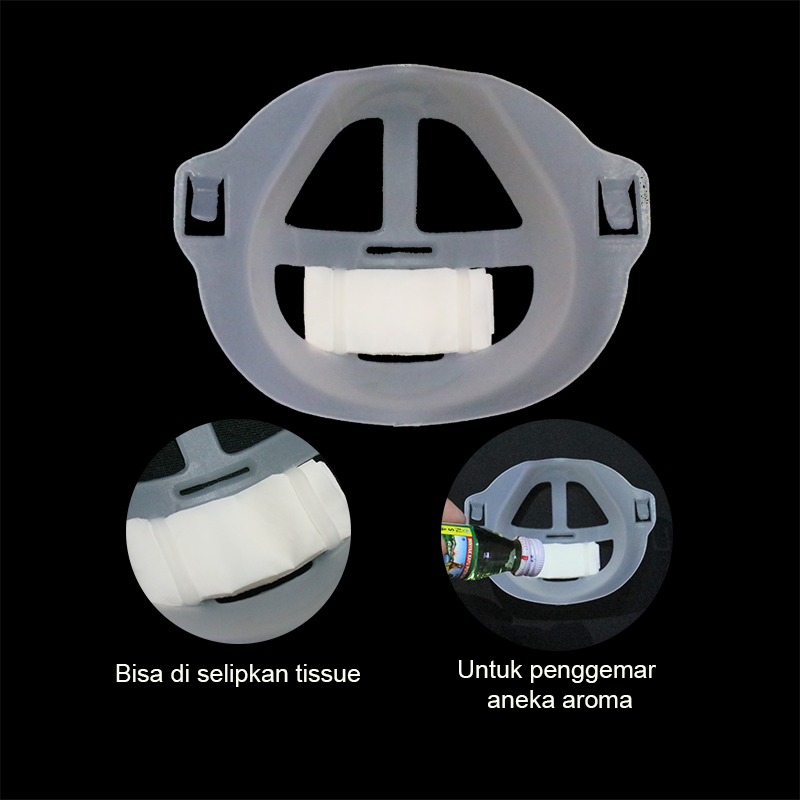
<style>
.page{position:relative;width:800px;height:800px;background:#000000}
.page>*{position:absolute;margin:0}
.t1{font:25px "ArialMT";color:#fbfbf0}
</style>
<div class="page">
<p class="t1" style="left:116px;top:664px;width:244px;height:23px">Bisa di selipkan tissue</p>
<p class="t1" style="left:459px;top:660px;width:197px;height:48px;text-align:center">Untuk penggemar <br>aneka aroma</p>
</div>
